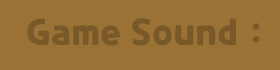
<style>
.page{position:relative;width:280px;height:70px;background:#9b7236}
.page>*{position:absolute;margin:0}
.t1{font:36px "CookieRun-Bold";color:#7a5929}
</style>
<div class="page">
<p class="t1" style="left:27px;top:18px;width:209px;height:28px">Game Sound</p>
<p class="t1" style="left:252px;top:23px;width:8px;height:20px">:</p>
</div>
